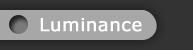
<style>
.page{position:relative;width:193px;height:50px;background:#a7a7a7}
.page>*{position:absolute;margin:0}
.t1{font:18px "Verdana";letter-spacing:0.01em;color:#ffffff;font-weight:bold}
</style>
<div class="page">
<p class="t1" style="left:40px;top:18px;width:102px;height:14px">Luminance</p>
</div>
